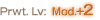
<style>
.page{position:relative;width:100px;height:20px;background:#ffffff}
.page>*{position:absolute;margin:0}
.t1{font:10px "GothicMB101Pro-DeBold";letter-spacing:-0.04em;color:#cc6719}
.t2{font:14px "GothicMB101Pro-DeBold";letter-spacing:-0.04em;color:#cc6719}
.t3{font:10px "GothicMB101Pro-DeBold";letter-spacing:-0.04em;color:#8b6e51}
</style>
<div class="page">
<p class="t1" style="left:52px;top:4px;width:41px;height:12px">Mod.+<span class="t2">2</span></p>
<p class="t3" style="left:0px;top:7px;width:46px;height:9px;opacity:0.9">Prwt. Lv:</p>
</div>
